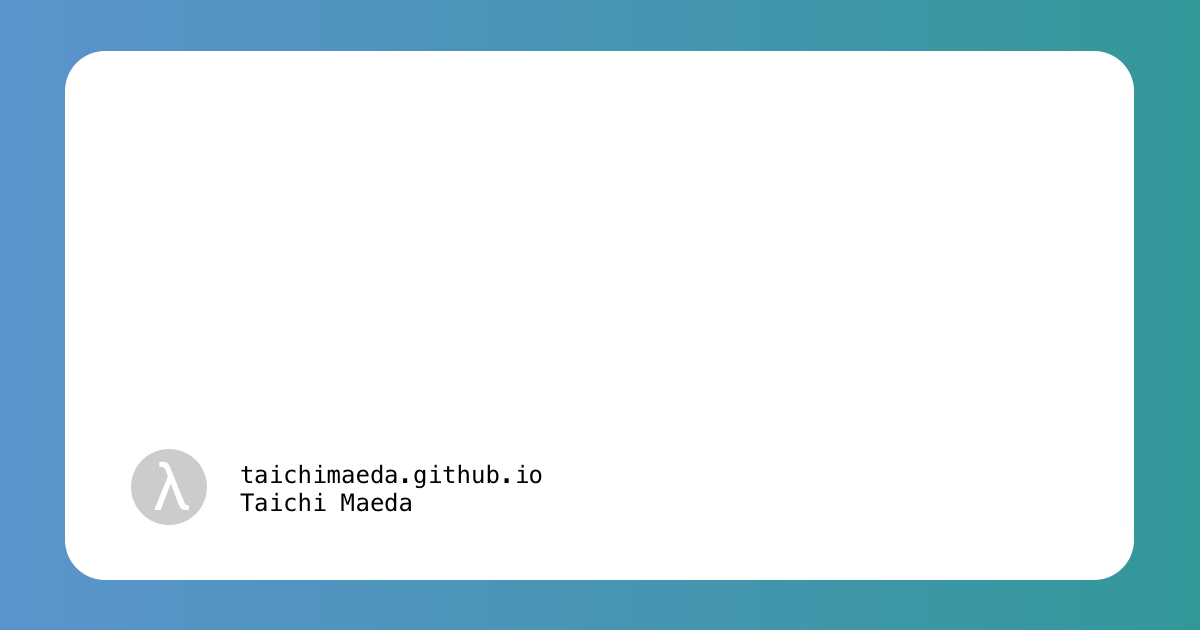
<style>
.page{position:relative;width:1200px;height:630px;background:#ffffff}
.page>*{position:absolute;margin:0}
.t1{font:66.8px "Helvetica";color:#ffffff}
.t2{font:24px "Menlo-Regular";color:#000000}
.t3{font:24px/28px "Menlo-Regular";color:#000000}
</style>
<div class="page">
<p class="t1" style="left:154px;top:461px;width:35px;height:49px">λ</p>
<p class="t2" style="left:240px;top:464px;width:302px;height:48px">taichimaeda.github.io<br><span class="t3">Taichi Maeda</span></p>
</div>
